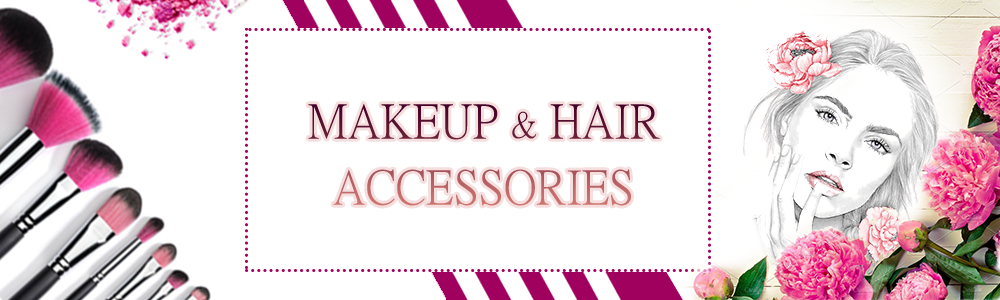
<style>
.page{position:relative;width:1000px;height:300px;background:#ffffff}
.page>*{position:absolute;margin:0}
.t1{font:48px/22px "PMingLiU";letter-spacing:0.001em}
.t2{font:36px/22px "PMingLiU";letter-spacing:0.001em}
</style>
<div class="page">
<p class="t1" style="left:308px;top:103px;width:352px;height:103px;text-align:center">MAKEUP <span class="t2">&amp;</span> HAIR<br><br><br>ACCESSORIES</p>
</div>
